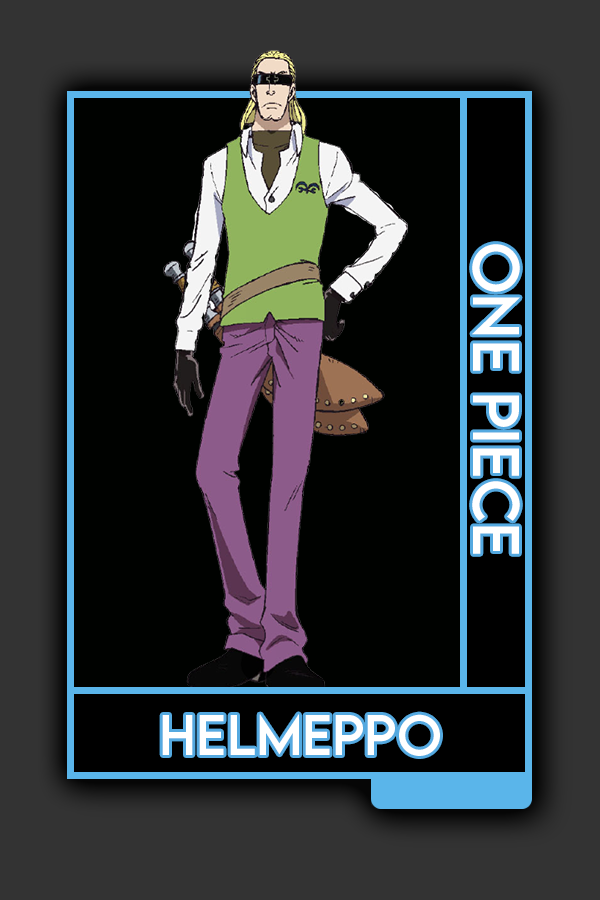
<style>
.page{position:relative;width:600px;height:900px;background:#000200}
.page>*{position:absolute;margin:0}
.t1{font:58.4px "LEMONMILK-Regular";color:#ffffff}
.t2{font:50.5px "LEMONMILK-Regular";color:#ffffff}
</style>
<div class="page">
<p class="t1" style="left:472px;top:244px;width:48px;height:310px;rotate:90deg">One Piece</p>
<p class="t2" style="left:162px;top:714px;width:278px;height:42px">Helmeppo</p>
</div>
